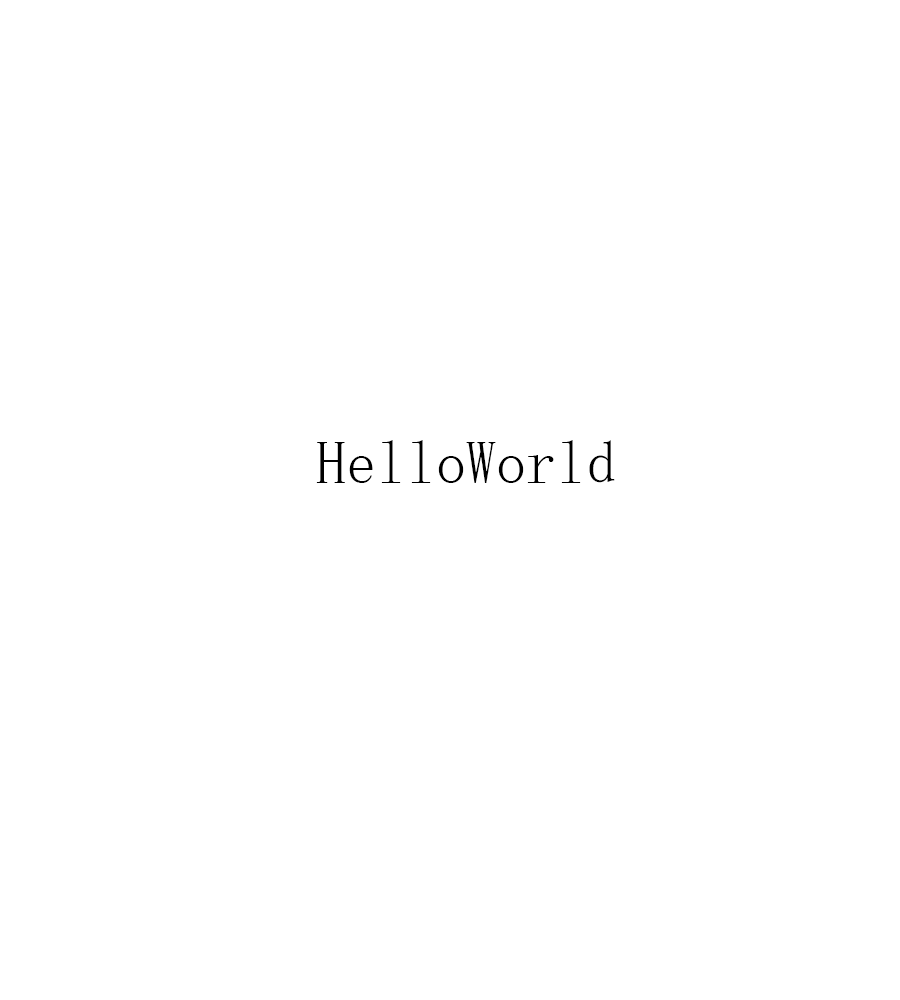
<style>
.page{position:relative;width:900px;height:1000px;background:#ffffff}
.page>*{position:absolute;margin:0}
.t1{font:60px "SimSun";color:#000000}
</style>
<div class="page">
<p class="t1" style="left:316px;top:440px;width:299px;height:43px">HelloWorld</p>
</div>
